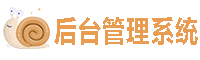
<style>
.page{position:relative;width:200px;height:60px;background:#ffffff}
.page>*{position:absolute;margin:0}
.t1{font:29.7px "MicrosoftYaHei-Bold";letter-spacing:0.05em;color:#e99d53;scale:0.77 1}
</style>
<div class="page">
<p class="t1" style="left:54px;top:17px;width:144px;height:28px">后台管理系统</p>
</div>
